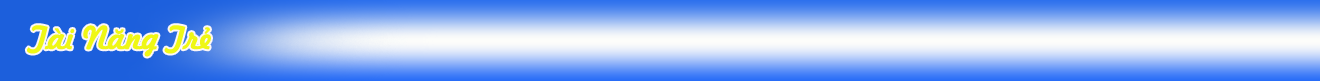
<style>
.page{position:relative;width:1320px;height:81px}
.page>*{position:absolute;margin:0}
.t1{font:30px "Freehand-Italic";color:#eff715;font-weight:bold}
</style>
<div class="page">
<p class="t1" style="left:26px;top:25px;width:185px;height:32px">Tài Năng Trẻ</p>
</div>
